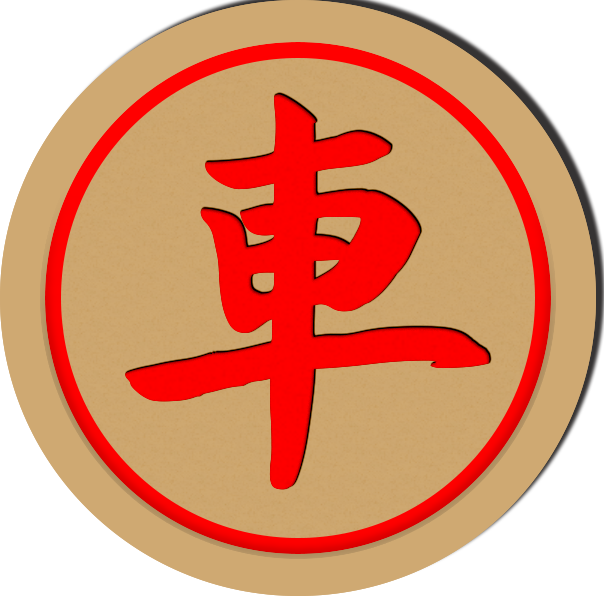
<style>
.page{position:relative;width:604px;height:608px;background:#ffffff}
.page>*{position:absolute;margin:0}
.t1{font:416.7px "AaYuwenlaoshidezi";letter-spacing:0.04em;color:#ff0000}
</style>
<div class="page">
<p class="t1" style="left:125px;top:94px;width:365px;height:396px">車</p>
<p class="t1" style="left:125px;top:94px;width:365px;height:396px">車</p>
</div>
